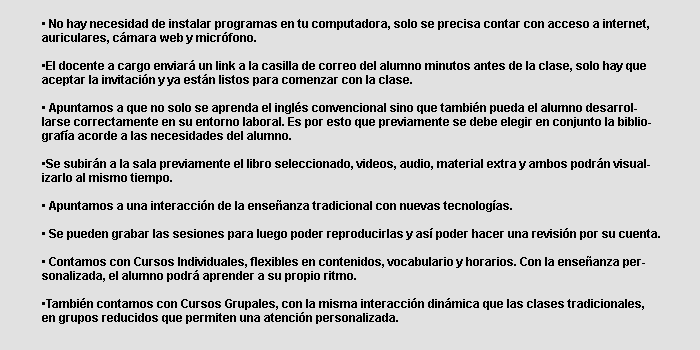
<style>
.page{position:relative;width:700px;height:350px;background:#e1e1e1}
.page>*{position:absolute;margin:0}
.t1{font:11.7px "Arial-BoldMT";color:#000000}
</style>
<div class="page">
<p class="t1" style="left:42px;top:19px;width:618px;height:305px">• No hay necesidad de instalar programas en tu computadora, solo se precisa contar con acceso a internet, auriculares, cámara web y micrófono.<br><br>•El docente a cargo enviará un link a la casilla de correo del alumno minutos antes de la clase, solo hay que aceptar la invitación y ya están listos para comenzar con la clase.<br><br>• Apuntamos a que no solo se aprenda el inglés convencional sino que también pueda el alumno desarrollarse correctamente en su entorno laboral. Es por esto que previamente se debe elegir en conjunto la bibliografía acorde a las necesidades del alumno.<br><br>•Se subirán a la sala previamente el libro seleccionado, videos, audio, material extra y ambos podrán visualizarlo al mismo tiempo.<br><br>• Apuntamos a una interacción de la enseñanza tradicional con nuevas tecnologías.<br><br>• Se pueden grabar las sesiones para luego poder reproducirlas y así poder hacer una revisión por su cuenta.<br><br>• Contamos con Cursos Individuales, flexibles en contenidos, vocabulario y horarios. Con la enseñanza personalizada, el alumno podrá aprender a su propio ritmo.<br><br>•También contamos con Cursos Grupales, con la misma interacción dinámica que las clases tradicionales, en grupos reducidos que permiten una atención personalizada.</p>
</div>
